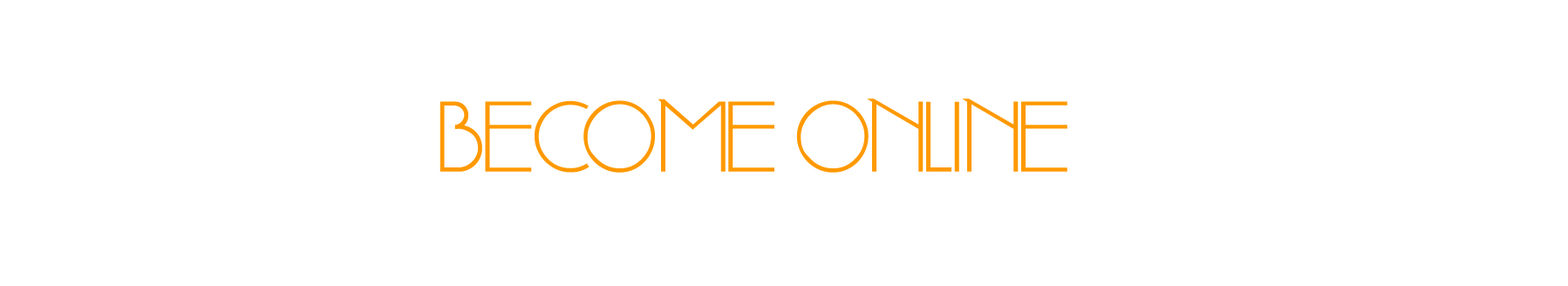
<style>
.page{position:relative;width:1568px;height:286px;background:#ffffff}
.page>*{position:absolute;margin:0}
.t1{font:86.3px "DSStandartCyr";color:#ff9900}
</style>
<div class="page">
<p class="t1" style="left:440px;top:99px;width:627px;height:74px">BECOME ONLINE</p>
</div>
